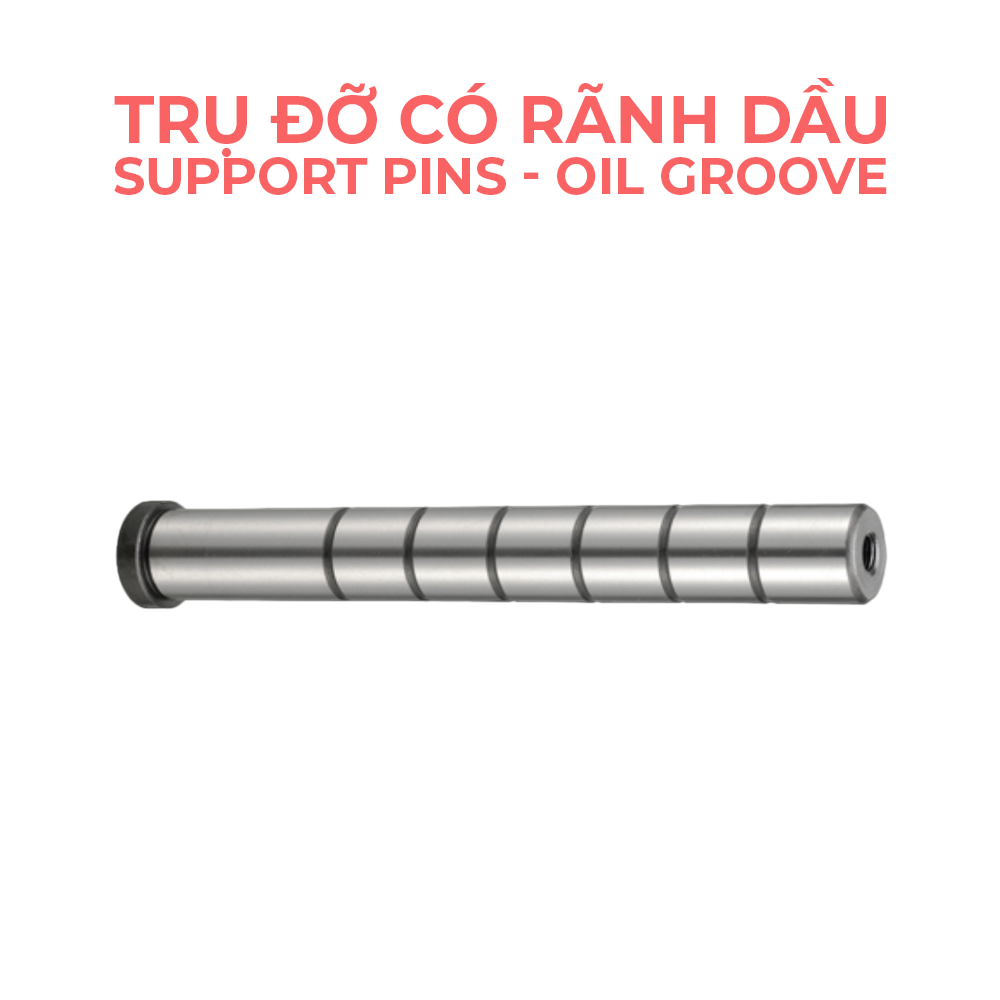
<style>
.page{position:relative;width:1000px;height:1000px;background:#ffffff}
.page>*{position:absolute;margin:0}
.t1{font:51px "Montserrat-Bold";color:#fa6363;text-transform:uppercase}
</style>
<div class="page">
<p class="t1" style="left:114px;top:78px;width:773px;height:117px;text-align:center">Trụ đỡ có rãnh dầu <br>Support Pins - Oil Groove</p>
</div>
